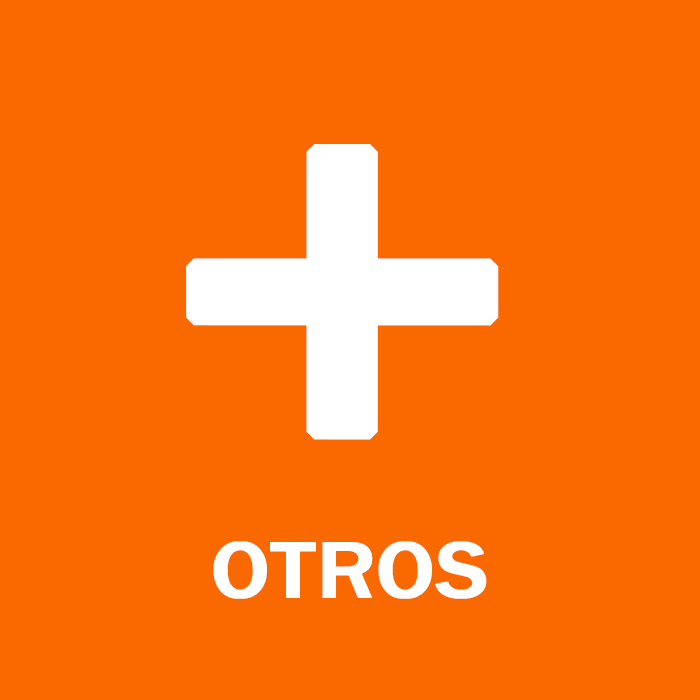
<style>
.page{position:relative;width:700px;height:700px;background:#fa6800}
.page>*{position:absolute;margin:0}
.t1{font:82.5px/120px "FranklinGothic-Medium";color:#ffffff;font-weight:bold;scale:1.09 1}
.t2{font:550px/120px "FranklinGothic-Medium";color:#ffffff;font-weight:bold;scale:1.09 1}
</style>
<div class="page">
<p class="t1" style="left:186px;top:144px;width:313px;height:455px;text-align:center"><span class="t2">+<br></span>OTROS</p>
</div>
